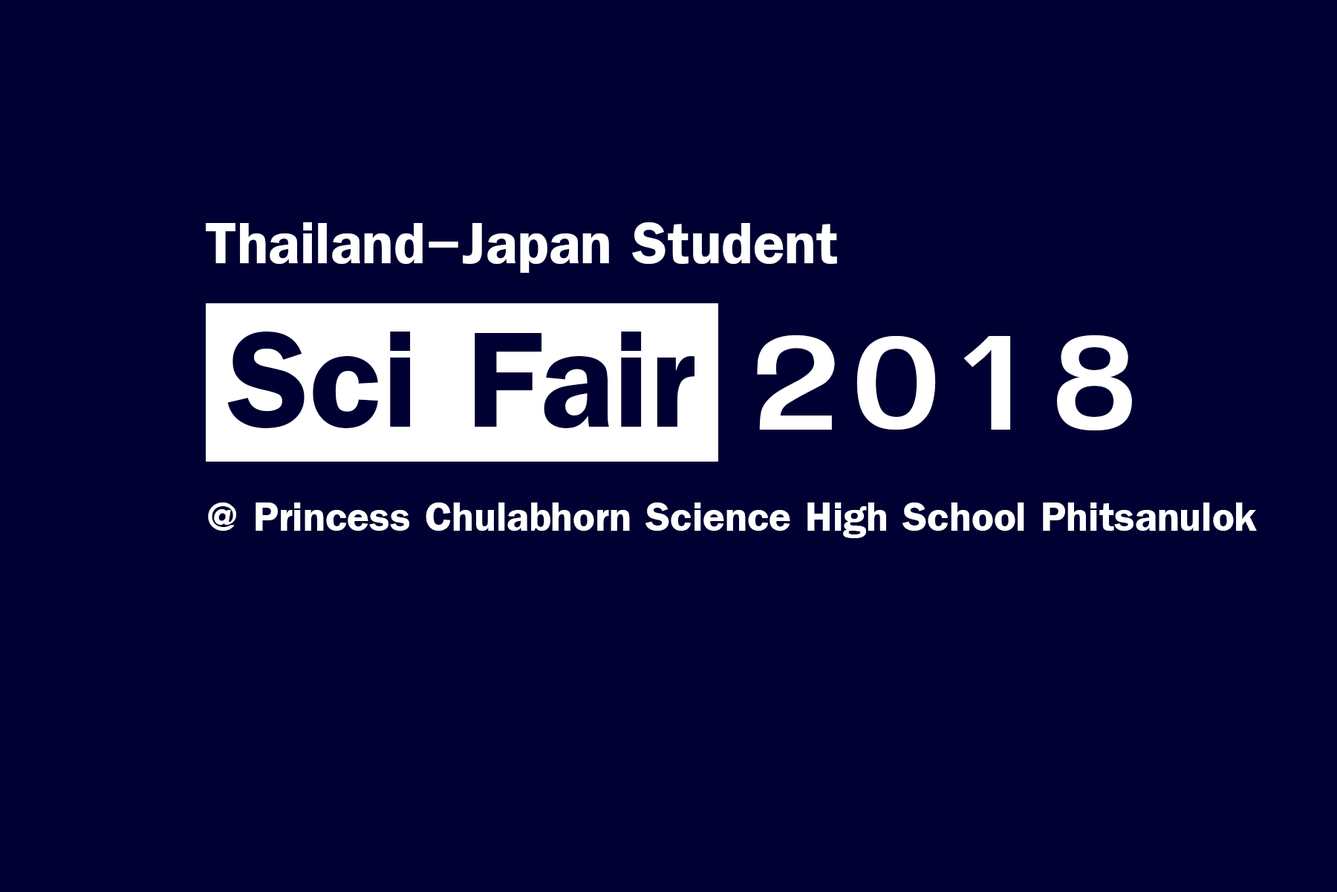
<style>
.page{position:relative;width:1337px;height:892px;background:#000033}
.page>*{position:absolute;margin:0}
.t1{font:92.9px "FreesiaUPCBold";color:#ffffff}
.t2{font:216.7px "FreesiaUPCBold";color:#000033}
.t3{font:216.7px "FreesiaUPCBold";color:#ffffff}
.t4{font:65px "FreesiaUPCBold";color:#ffffff}
</style>
<div class="page">
<p class="t1" style="left:206px;top:222px;width:631px;height:51px">Thailand-Japan Student</p>
<p class="t2" style="left:227px;top:331px;width:468px;height:97px">Sci Fair</p>
<p class="t3" style="left:757px;top:335px;width:375px;height:95px">2018</p>
<p class="t4" style="left:208px;top:502px;width:1049px;height:36px">@ Princess Chulabhorn Science High School Phitsanulok</p>
</div>
